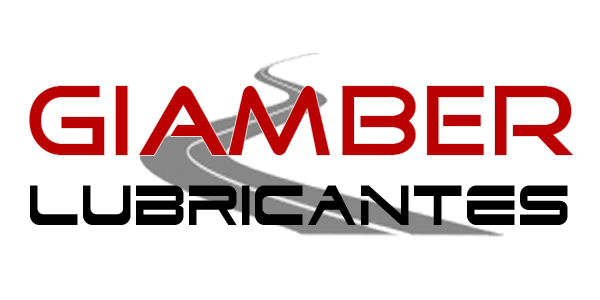
<style>
.page{position:relative;width:600px;height:300px;background:#ffffff}
.page>*{position:absolute;margin:0}
.t1{font:99.4px "GoodTimes";color:#ba0000;text-transform:uppercase;scale:0.96 1}
.t2{font:67.9px "Dodger";color:#000000;text-transform:uppercase;scale:0.74 1}
</style>
<div class="page">
<p class="t1" style="left:29px;top:86px;width:544px;height:69px">GIAMBER</p>
<p class="t2" style="left:30px;top:185px;width:538px;height:40px">lubricantes</p>
</div>
